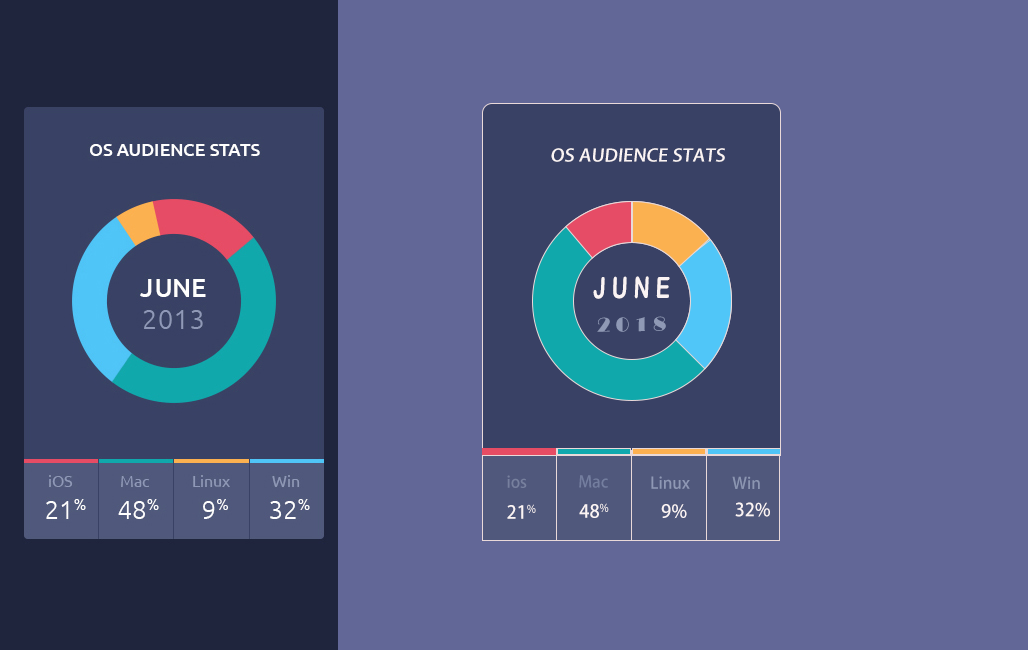
<style>
.page{position:relative;width:1028px;height:650px;background:#626797}
.page>*{position:absolute;margin:0}
.t1{font:16.9px "AdobeHeitiStd-Regular";color:#fbf4f4;scale:1.11 1}
.t2{font:29.5px "ArialRoundedMTBold";color:#fbf4f4;scale:0.74 1}
.t3{font:20.6px "Broadway";color:#8f99b5}
.t4{font:16px "AdobeHeitiStd-Regular";color:#77809e}
.t5{font:16px "AdobeHeitiStd-Regular";color:#747e9f}
.t6{font:16px "AdobeHeitiStd-Regular";color:#8f98b5}
.t7{font:16px "AdobeHeitiStd-Regular";color:#8b95b1}
.t8{font:18px "AdobeHeitiStd-Regular";color:#fbf4f4}
</style>
<div class="page">
<p class="t1" style="left:551px;top:148px;width:174px;height:14px">OS AUDIENCE STATS</p>
<p class="t2" style="left:593px;top:276px;width:77px;height:23px;rotate:-1deg">J U N E</p>
<p class="t3" style="left:597px;top:316px;width:69px;height:16px;rotate:-1deg">2 0 1 8</p>
<p class="t4" style="left:507px;top:475px;width:20px;height:13px">ios</p>
<p class="t5" style="left:579px;top:475px;width:29px;height:13px">Mac</p>
<p class="t6" style="left:651px;top:476px;width:39px;height:13px">Linux</p>
<p class="t7" style="left:732px;top:476px;width:28px;height:13px">Win</p>
<p class="t8" style="left:507px;top:504px;width:29px;height:15px">２1%</p>
<p class="t8" style="left:579px;top:503px;width:30px;height:15px">48%</p>
<p class="t8" style="left:661px;top:504px;width:26px;height:15px">9%</p>
<p class="t8" style="left:735px;top:502px;width:35px;height:15px">32%</p>
</div>
